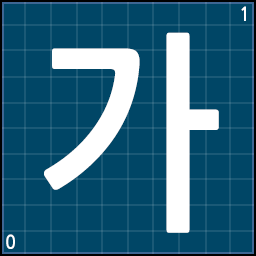
<style>
.page{position:relative;width:256px;height:256px;background:#004666}
.page>*{position:absolute;margin:0}
.t1{font:18.9px "NanumGothicBold";color:#ffffff;scale:0.93 1}
.t2{font:210.5px "NanumGothicBold";color:#ffffff;scale:0.93 1}
</style>
<div class="page">
<p class="t1" style="left:241px;top:6px;width:5px;height:15px">1</p>
<p class="t2" style="left:44px;top:32px;width:175px;height:201px">가</p>
<p class="t1" style="left:6px;top:234px;width:9px;height:15px">0</p>
</div>
